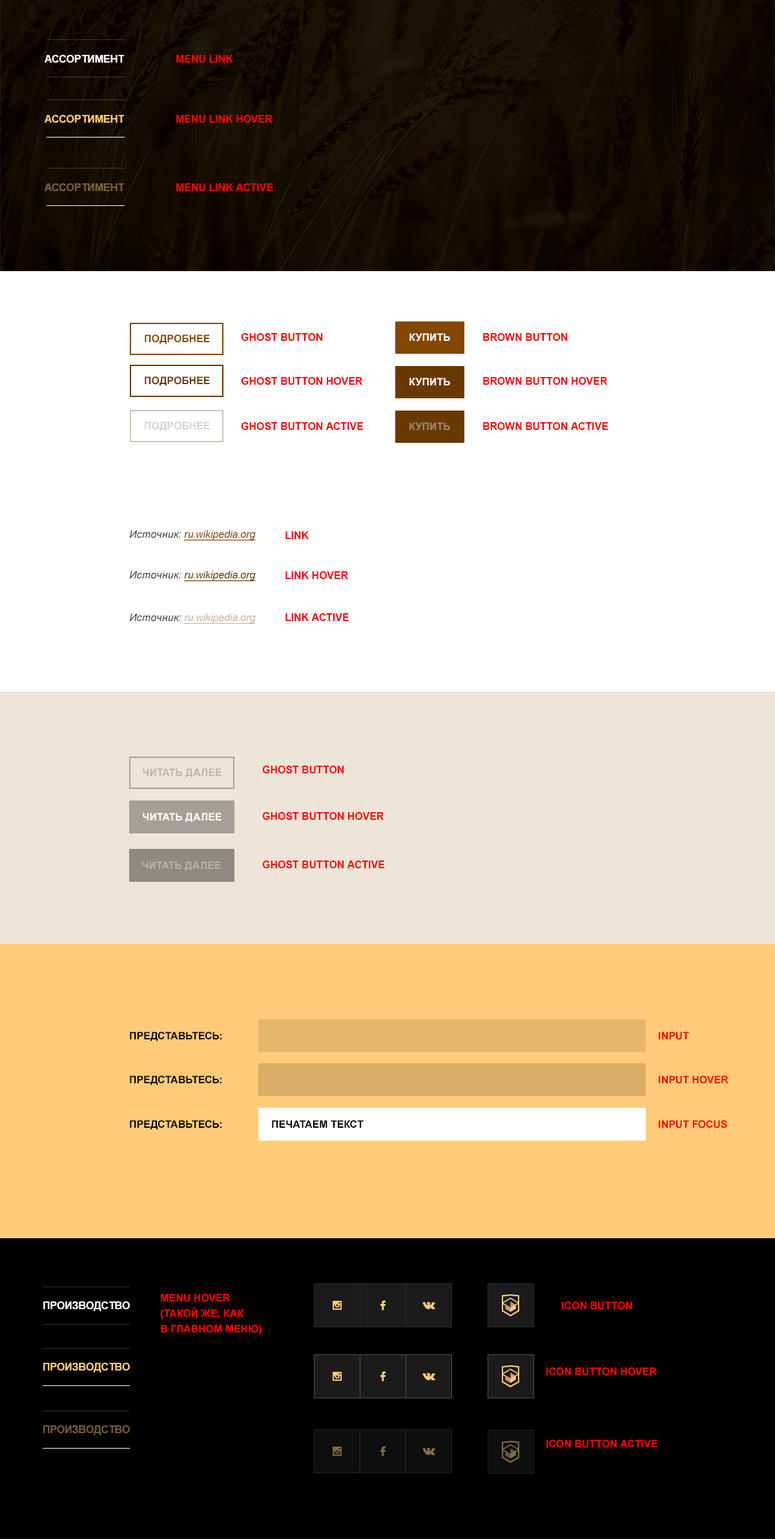
<style>
.page{position:relative;width:775px;height:1539px;background:#ffffff}
.page>*{position:absolute;margin:0}
.t1{font:10.3px "Arial-BoldMT";color:#ffffff;text-transform:uppercase}
.t2{font:10.3px "Arial-BoldMT";color:#ff0000;text-transform:uppercase}
.t3{font:10.3px "Arial-BoldMT";color:#ffcb78;text-transform:uppercase}
.t4{font:10.3px "Arial-BoldMT";color:#7a6035;text-transform:uppercase}
.t5{font:10.3px "Arial-BoldMT";color:#834700;text-transform:uppercase}
.t6{font:10.3px "Arial-BoldMT";color:#6a3900;text-transform:uppercase}
.t7{font:10.3px "Arial-BoldMT";text-transform:uppercase}
.t8{font:10.3px "Arial-BoldMT";color:#d9d1ca;text-transform:uppercase}
.t9{font:10.3px "Arial-BoldMT";color:#a08874;text-transform:uppercase}
.t10{font:10.3px "Arial-ItalicMT";color:#834700;text-decoration:underline}
.t11{font:10.3px "Arial-ItalicMT";color:#444444}
.t12{font:10.3px "Arial-ItalicMT";color:#6a3900;text-decoration:underline}
.t13{font:10.3px "Arial-ItalicMT";color:#cab7a2;text-decoration:underline}
.t14{font:10.3px "Arial-BoldMT";color:#bcb6ab;text-transform:uppercase}
.t15{font:10.3px "Arial-BoldMT";color:#b5b2ad;text-transform:uppercase}
.t16{font:10.3px "Arial-BoldMT";color:#000000;text-transform:uppercase}
.t17{font:10.3px "Arial-BoldMT";color:#ffffff}
.t18{font:10.3px/15.5px "Arial-BoldMT";color:#ff0000;text-transform:uppercase}
.t19{font:10.3px "Arial-BoldMT";color:#ffcb78}
.t20{font:10.3px "Arial-BoldMT";color:#745b33}
</style>
<div class="page">
<p class="t1" style="left:45px;top:55px;width:79px;height:8px">Ассортимент</p>
<p class="t2" style="left:176px;top:55px;width:57px;height:8px">Menu link</p>
<p class="t3" style="left:45px;top:115px;width:79px;height:8px">Ассортимент</p>
<p class="t2" style="left:176px;top:115px;width:96px;height:8px">Menu link HoVeR</p>
<p class="t4" style="left:45px;top:183px;width:79px;height:8px">Ассортимент</p>
<p class="t2" style="left:176px;top:183px;width:97px;height:8px">Menu link active</p>
<p class="t5" style="left:145px;top:334px;width:65px;height:10px">Подробнее</p>
<p class="t2" style="left:241px;top:333px;width:82px;height:8px">Ghost button</p>
<p class="t1" style="left:409px;top:333px;width:41px;height:9px">Купить</p>
<p class="t2" style="left:483px;top:333px;width:84px;height:8px">Brown BuTtoN</p>
<p class="t6" style="left:145px;top:376px;width:65px;height:10px">Подробнее</p>
<p class="t2" style="left:241px;top:377px;width:121px;height:8px">Ghost button HoVeR</p>
<p class="t1" style="left:409px;top:378px;width:41px;height:8px">Купить</p>
<p class="t7" style="left:410px;top:377px;width:41px;height:8px">Купить</p>
<p class="t2" style="left:483px;top:377px;width:125px;height:8px">Brown button HoVeR</p>
<p class="t8" style="left:145px;top:422px;width:65px;height:9px">Подробнее</p>
<p class="t2" style="left:241px;top:422px;width:122px;height:8px">Ghost button active</p>
<p class="t9" style="left:409px;top:422px;width:41px;height:9px">Купить</p>
<p class="t7" style="left:410px;top:422px;width:41px;height:8px">Купить</p>
<p class="t2" style="left:483px;top:422px;width:125px;height:8px">Brown button active</p>
<p class="t10" style="left:129px;top:530px;width:127px;height:11px"><span class="t11">Источник: </span>ru.wikipedia.org</p>
<p class="t2" style="left:285px;top:531px;width:24px;height:8px">Link</p>
<p class="t12" style="left:129px;top:571px;width:127px;height:11px"><span class="t11">Источник: </span>ru.wikipedia.org</p>
<p class="t2" style="left:285px;top:571px;width:63px;height:8px">Link HoVeR</p>
<p class="t13" style="left:129px;top:613px;width:127px;height:11px"><span class="t11">Источник: </span>ru.wikipedia.org</p>
<p class="t2" style="left:285px;top:613px;width:64px;height:8px">Link active</p>
<p class="t14" style="left:143px;top:768px;width:78px;height:10px">Читать далее</p>
<p class="t2" style="left:262px;top:766px;width:82px;height:7px">GHOST button</p>
<p class="t1" style="left:143px;top:813px;width:78px;height:10px">Читать далее</p>
<p class="t2" style="left:262px;top:812px;width:121px;height:8px">GHOST button HoVeR</p>
<p class="t15" style="left:142px;top:861px;width:79px;height:10px">Читать далее</p>
<p class="t2" style="left:262px;top:861px;width:123px;height:7px">GHOST button active</p>
<p class="t16" style="left:130px;top:1032px;width:91px;height:9px">Представьтесь:</p>
<p class="t2" style="left:659px;top:1032px;width:30px;height:8px">INPUT</p>
<p class="t16" style="left:130px;top:1076px;width:91px;height:9px">Представьтесь:</p>
<p class="t2" style="left:659px;top:1076px;width:69px;height:8px">INPUT HoVeR</p>
<p class="t16" style="left:130px;top:1120px;width:91px;height:10px">Представьтесь:</p>
<p class="t16" style="left:272px;top:1120px;width:91px;height:8px">ПЕЧАТАЕМ ТЕКСТ</p>
<p class="t2" style="left:659px;top:1120px;width:68px;height:9px">INPUT focus</p>
<p class="t17" style="left:43px;top:1302px;width:87px;height:9px">ПРОИЗВОДСТВО</p>
<p class="t18" style="left:160px;top:1294px;width:101px;height:41px">MENU HoVeR<br>(такой же, как<br>в главном меню)</p>
<p class="t2" style="left:562px;top:1302px;width:70px;height:8px">icon button</p>
<p class="t19" style="left:43px;top:1363px;width:87px;height:10px">ПРОИЗВОДСТВО</p>
<p class="t2" style="left:546px;top:1367px;width:111px;height:9px">icon button HoVeR</p>
<p class="t20" style="left:43px;top:1426px;width:87px;height:9px">ПРОИЗВОДСТВО</p>
<p class="t2" style="left:546px;top:1440px;width:111px;height:8px">icon button active</p>
</div>
